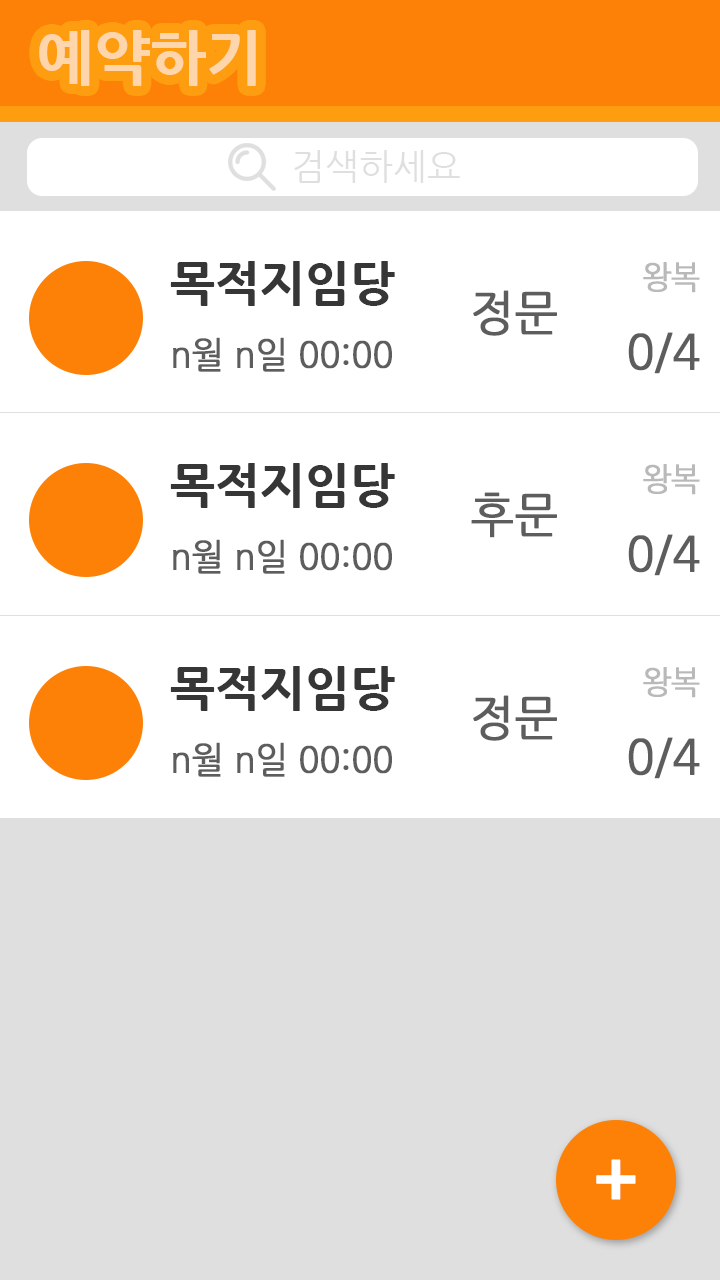
<style>
.page{position:relative;width:720px;height:1280px;background:#ffffff}
.page>*{position:absolute;margin:0}
.t1{font:60px "NanumGothicExtraBold";color:#ffd5ac}
.t2{font:36px "NanumGothic";color:#dfdfdf}
.t3{font:48px "NanumGothicExtraBold";color:#363636}
.t4{font:32px "NanumGothic";letter-spacing:-0.04em;color:#b9b9b9;font-weight:bold;scale:0.96 1}
.t5{font:48px "NanumGothic";letter-spacing:-0.02em;color:#5d5d5d;font-weight:bold;scale:0.96 1}
.t6{font:36px "NanumGothic";letter-spacing:-0.02em;color:#5d5d5d;font-weight:bold;scale:0.96 1}
.t7{font:72px "NanumGothicExtraBold";color:#ffffff;scale:0.97 1}
</style>
<div class="page">
<p class="t1" style="left:39px;top:30px;width:217px;height:56px">예약하기</p>
<p class="t2" style="left:294px;top:150px;width:166px;height:33px">검색하세요</p>
<p class="t3" style="left:170px;top:261px;width:225px;height:45px">목적지임당</p>
<p class="t4" style="left:643px;top:262px;width:57px;height:31px">왕복</p>
<p class="t5" style="left:473px;top:290px;width:84px;height:46px">정문</p>
<p class="t6" style="left:173px;top:337px;width:219px;height:35px">n월 n일 00:00</p>
<p class="t5" style="left:628px;top:332px;width:72px;height:42px">0/4</p>
<p class="t3" style="left:170px;top:463px;width:225px;height:45px">목적지임당</p>
<p class="t4" style="left:643px;top:464px;width:57px;height:31px">왕복</p>
<p class="t5" style="left:471px;top:492px;width:86px;height:46px">후문</p>
<p class="t5" style="left:628px;top:534px;width:72px;height:42px">0/4</p>
<p class="t6" style="left:173px;top:539px;width:219px;height:35px">n월 n일 00:00</p>
<p class="t3" style="left:170px;top:666px;width:225px;height:45px">목적지임당</p>
<p class="t4" style="left:643px;top:667px;width:57px;height:31px">왕복</p>
<p class="t5" style="left:473px;top:695px;width:84px;height:46px">정문</p>
<p class="t5" style="left:628px;top:737px;width:72px;height:42px">0/4</p>
<p class="t6" style="left:173px;top:742px;width:219px;height:35px">n월 n일 00:00</p>
<p class="t7" style="left:596px;top:1159px;width:40px;height:41px">+</p>
</div>
